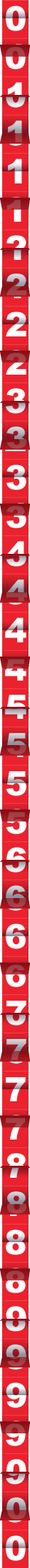
<style>
.page{position:relative;width:30px;height:1568px}
.page>*{position:absolute;margin:0}
.t1{font:33.7px "Arial-Black";color:#ffffff;text-transform:uppercase}
.t2{font:33.7px "Arial-Black";text-transform:uppercase}
.t3{font:29.6px "Arial-Black";text-transform:uppercase;scale:1.11 1}
</style>
<div class="page">
<p class="t1" style="left:6px;top:6px;width:19px;height:25px">0</p>
<p class="t2" style="left:6px;top:44px;width:19px;height:25px">0</p>
<p class="t3" style="left:6px;top:47px;width:19px;height:22px">0</p>
<p class="t2" style="left:6px;top:82px;width:19px;height:26px">0</p>
<p class="t1" style="left:8px;top:82px;width:14px;height:25px">1</p>
<p class="t2" style="left:8px;top:120px;width:14px;height:25px">1</p>
<p class="t3" style="left:8px;top:120px;width:14px;height:22px">1</p>
<p class="t1" style="left:8px;top:159px;width:14px;height:24px">1</p>
<p class="t2" style="left:7px;top:197px;width:14px;height:25px">1</p>
<p class="t3" style="left:6px;top:200px;width:15px;height:22px">1</p>
<p class="t2" style="left:6px;top:235px;width:20px;height:25px">2</p>
<p class="t2" style="left:7px;top:235px;width:14px;height:25px">1</p>
<p class="t2" style="left:6px;top:273px;width:20px;height:25px">2</p>
<p class="t3" style="left:6px;top:273px;width:20px;height:22px">2</p>
<p class="t1" style="left:6px;top:312px;width:20px;height:24px">2</p>
<p class="t2" style="left:6px;top:350px;width:20px;height:25px">2</p>
<p class="t3" style="left:6px;top:353px;width:19px;height:22px">2</p>
<p class="t2" style="left:6px;top:388px;width:19px;height:26px">3</p>
<p class="t1" style="left:6px;top:388px;width:20px;height:26px">3</p>
<p class="t2" style="left:5px;top:426px;width:20px;height:25px">2</p>
<p class="t2" style="left:6px;top:426px;width:20px;height:26px">3</p>
<p class="t3" style="left:6px;top:426px;width:20px;height:23px">3</p>
<p class="t1" style="left:6px;top:465px;width:20px;height:25px">3</p>
<p class="t3" style="left:6px;top:506px;width:19px;height:22px">3</p>
<p class="t2" style="left:6px;top:503px;width:20px;height:25px">3</p>
<p class="t2" style="left:6px;top:541px;width:21px;height:25px">4</p>
<p class="t2" style="left:6px;top:541px;width:20px;height:26px">3</p>
<p class="t2" style="left:6px;top:579px;width:21px;height:25px">4</p>
<p class="t3" style="left:6px;top:579px;width:21px;height:22px">4</p>
<p class="t1" style="left:5px;top:618px;width:21px;height:24px">4</p>
<p class="t2" style="left:5px;top:656px;width:21px;height:25px">4</p>
<p class="t2" style="left:5px;top:694px;width:21px;height:25px">4</p>
<p class="t2" style="left:6px;top:695px;width:20px;height:25px">5</p>
<p class="t2" style="left:6px;top:733px;width:20px;height:25px">5</p>
<p class="t3" style="left:6px;top:732px;width:21px;height:23px">5</p>
<p class="t1" style="left:6px;top:771px;width:20px;height:25px">5</p>
<p class="t2" style="left:6px;top:809px;width:20px;height:25px">5</p>
<p class="t2" style="left:6px;top:809px;width:20px;height:25px">6</p>
<p class="t3" style="left:6px;top:812px;width:20px;height:22px">5</p>
<p class="t2" style="left:5px;top:848px;width:20px;height:25px">5</p>
<p class="t2" style="left:6px;top:847px;width:20px;height:26px">6</p>
<p class="t2" style="left:5px;top:886px;width:20px;height:25px">5</p>
<p class="t2" style="left:6px;top:885px;width:19px;height:26px">6</p>
<p class="t3" style="left:6px;top:885px;width:20px;height:23px">6</p>
<p class="t1" style="left:6px;top:924px;width:19px;height:25px">6</p>
<p class="t2" style="left:6px;top:962px;width:19px;height:25px">6</p>
<p class="t3" style="left:6px;top:965px;width:19px;height:22px">6</p>
<p class="t2" style="left:6px;top:962px;width:20px;height:25px">7</p>
<p class="t2" style="left:6px;top:1000px;width:19px;height:26px">6</p>
<p class="t1" style="left:6px;top:1001px;width:20px;height:24px">7</p>
<p class="t2" style="left:6px;top:1039px;width:20px;height:24px">7</p>
<p class="t3" style="left:7px;top:1038px;width:19px;height:22px">7</p>
<p class="t1" style="left:6px;top:1077px;width:19px;height:24px">7</p>
<p class="t2" style="left:6px;top:1115px;width:19px;height:25px">7</p>
<p class="t3" style="left:6px;top:1118px;width:19px;height:22px">7</p>
<p class="t2" style="left:6px;top:1154px;width:19px;height:24px">7</p>
<p class="t2" style="left:6px;top:1153px;width:20px;height:25px">8</p>
<p class="t2" style="left:6px;top:1192px;width:19px;height:24px">7</p>
<p class="t2" style="left:6px;top:1191px;width:20px;height:26px">8</p>
<p class="t3" style="left:7px;top:1191px;width:19px;height:23px">8</p>
<p class="t1" style="left:6px;top:1229px;width:19px;height:26px">8</p>
<p class="t2" style="left:6px;top:1268px;width:19px;height:25px">8</p>
<p class="t3" style="left:6px;top:1271px;width:19px;height:22px">8</p>
<p class="t1" style="left:6px;top:1306px;width:20px;height:25px">9</p>
<p class="t2" style="left:6px;top:1306px;width:19px;height:25px">8</p>
<p class="t2" style="left:6px;top:1344px;width:20px;height:26px">9</p>
<p class="t2" style="left:6px;top:1344px;width:19px;height:26px">8</p>
<p class="t3" style="left:6px;top:1344px;width:20px;height:23px">9</p>
<p class="t1" style="left:6px;top:1382px;width:20px;height:26px">9</p>
<p class="t2" style="left:5px;top:1421px;width:20px;height:25px">9</p>
<p class="t3" style="left:5px;top:1424px;width:20px;height:22px">9</p>
<p class="t2" style="left:5px;top:1459px;width:20px;height:25px">9</p>
<p class="t2" style="left:6px;top:1459px;width:20px;height:25px">0</p>
<p class="t2" style="left:5px;top:1497px;width:20px;height:26px">9</p>
<p class="t2" style="left:6px;top:1497px;width:20px;height:26px">0</p>
<p class="t3" style="left:7px;top:1497px;width:19px;height:23px">0</p>
<p class="t1" style="left:6px;top:1535px;width:19px;height:26px">0</p>
</div>
